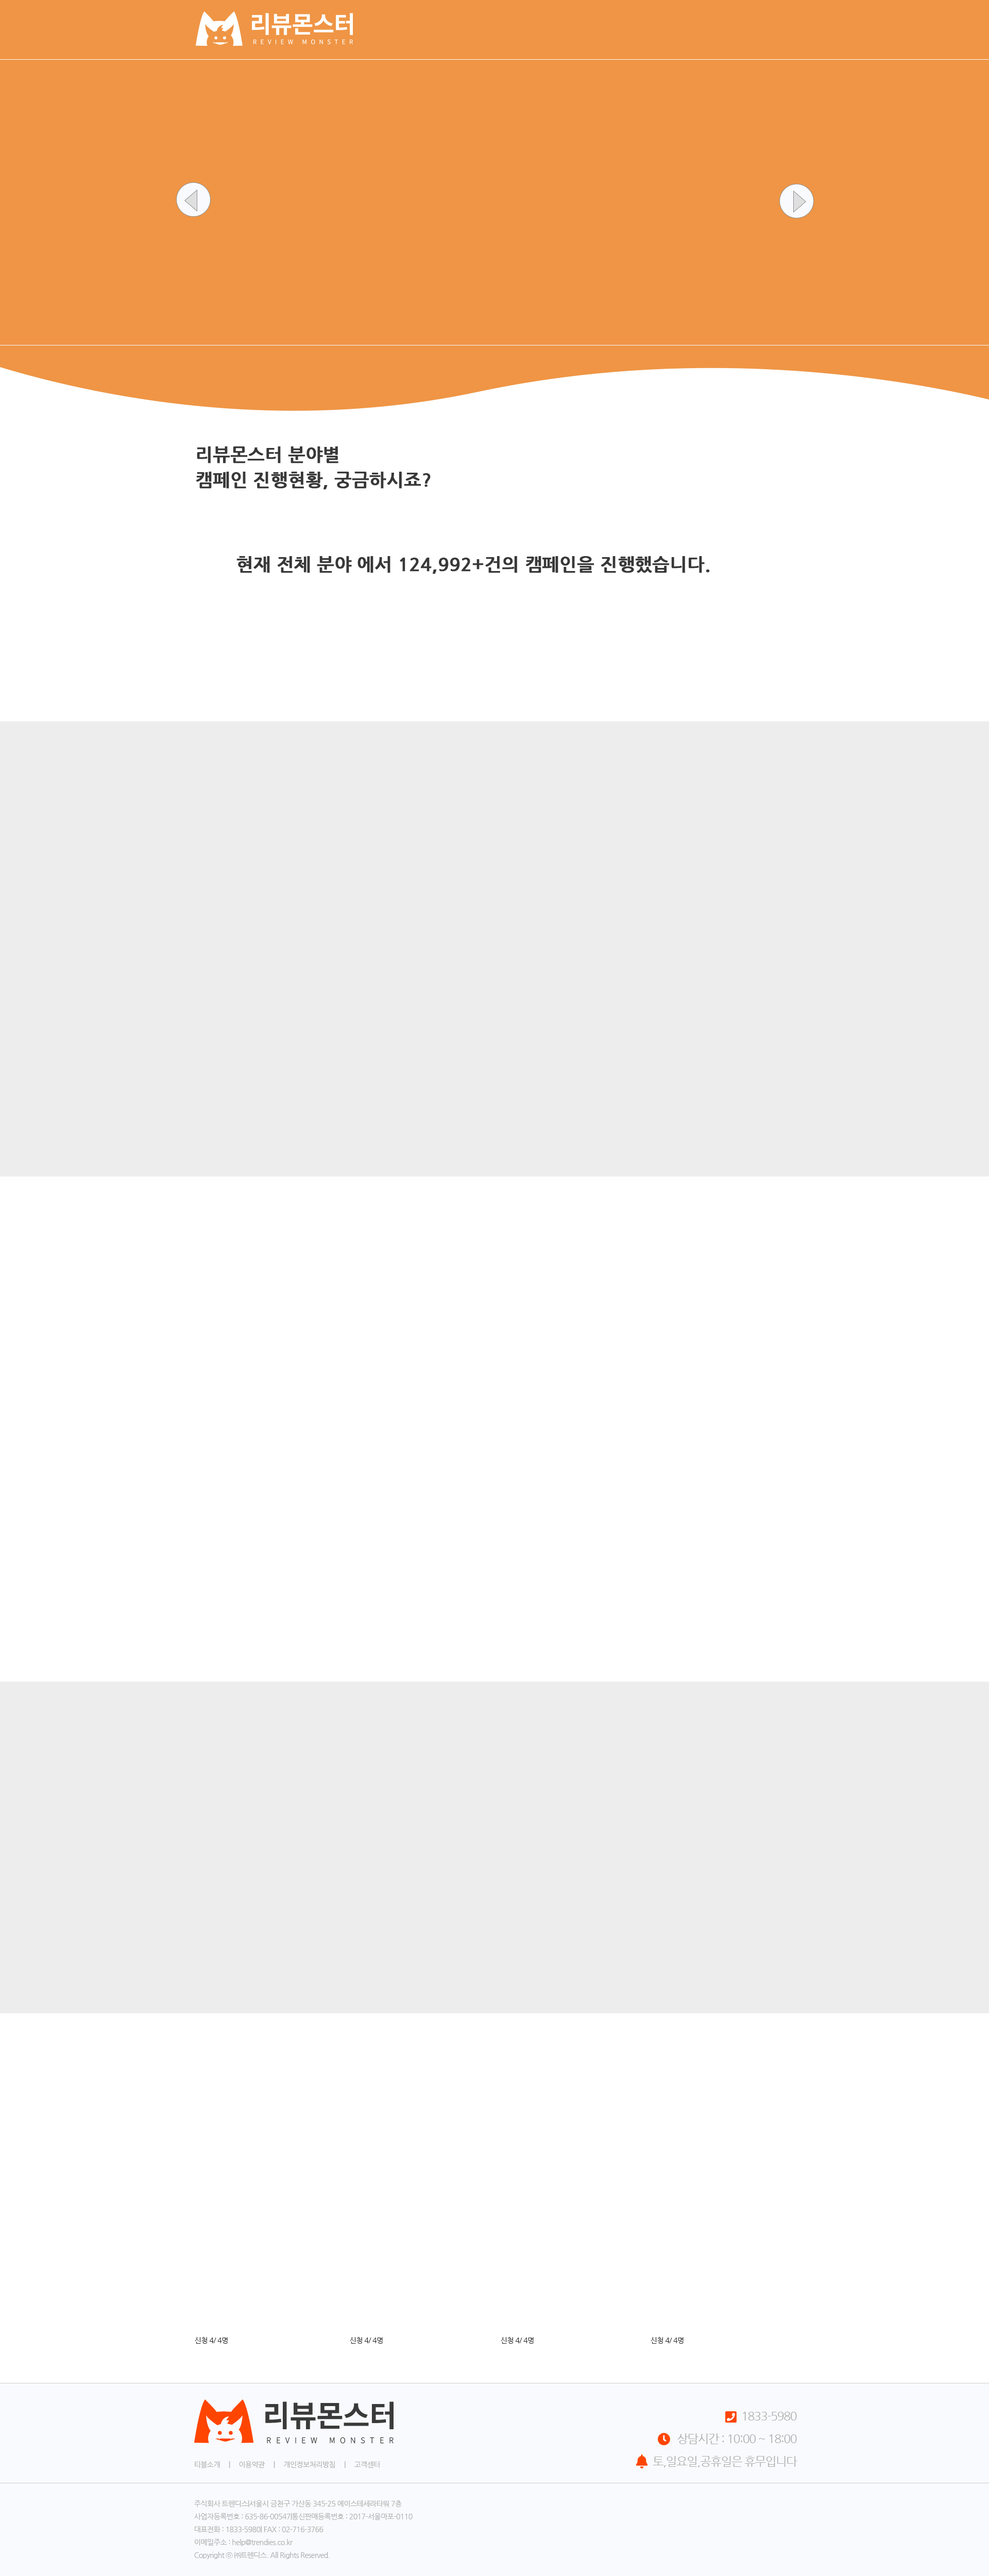
<style>
.page{position:relative;width:989px;height:2576px;background:#ffffff}
.page>*{position:absolute;margin:0}
.t1{font:18px/25.2px "NanumGothicBold";color:#383838;font-weight:bold}
.t2{font:18px "NanumGothicBold";color:#383838;font-weight:bold}
.t3{font:7.2px "NanumGothic";letter-spacing:-0.04em;color:#232323}
.t4{font:11.8px/11.3px "NanumGothic";letter-spacing:-0.06em;color:#aeaeae}
.t5{font:7.2px "NanumGothic";letter-spacing:-0.04em;color:#aeaeae}
.t6{font:7.2px/12.9px "NanumGothic";letter-spacing:-0.04em;color:#aeaeae}
</style>
<div class="page">
<p class="t1" style="left:196px;top:446px;width:234px;height:44px">리뷰몬스터 분야별<br>캠페인 진행현황, 궁금하시죠?</p>
<p class="t2" style="left:236px;top:556px;width:474px;height:18px">현재 전체 분야 에서 124,992+건의 캠페인을 진행했습니다.</p>
<p class="t3" style="left:195px;top:2337px;width:33px;height:7px">신청 4/ 4명</p>
<p class="t3" style="left:350px;top:2337px;width:33px;height:7px">신청 4/ 4명</p>
<p class="t3" style="left:500px;top:2337px;width:33px;height:7px">신청 4/ 4명</p>
<p class="t3" style="left:650px;top:2337px;width:33px;height:7px">신청 4/ 4명</p>
<p class="t4" style="left:652px;top:2412px;width:145px;height:55px;text-align:right">1833-5980<br><br>상담시간 : 10:00 ~ 18:00<br><br> 토,일요일,공휴일은 휴무입니다</p>
<p class="t5" style="left:195px;top:2461px;width:184px;height:7px">티블소개     |     이용약관     |     개인정보처리방침     |     고객센터</p>
<p class="t6" style="left:194px;top:2500px;width:218px;height:59px">주식회사 트렌디스|서울시 금천구 가산동 345-25 에이스테세라타워 7층<br>사업자등록번호 : 635-86-00547|통신판매등록번호 : 2017-서울마포-0110<br>대표전화 : 1833-5980| FAX : 02-716-3766<br>이메일주소 : help@trendies.co.kr<br>Copyright ⓒ ㈜트렌디스. All Rights Reserved.</p>
</div>
